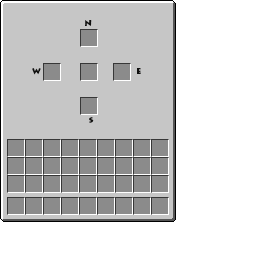
<style>
.page{position:relative;width:256px;height:256px;background:#ffffff}
.page>*{position:absolute;margin:0}
.t1{font:8px "LithosPro-Black";color:#10100f}
</style>
<div class="page">
<p class="t1" style="left:85px;top:20px;width:7px;height:6px">N</p>
<p class="t1" style="left:32px;top:68px;width:9px;height:7px">W</p>
<p class="t1" style="left:137px;top:68px;width:4px;height:6px">E</p>
<p class="t1" style="left:89px;top:117px;width:5px;height:6px">S</p>
</div>
